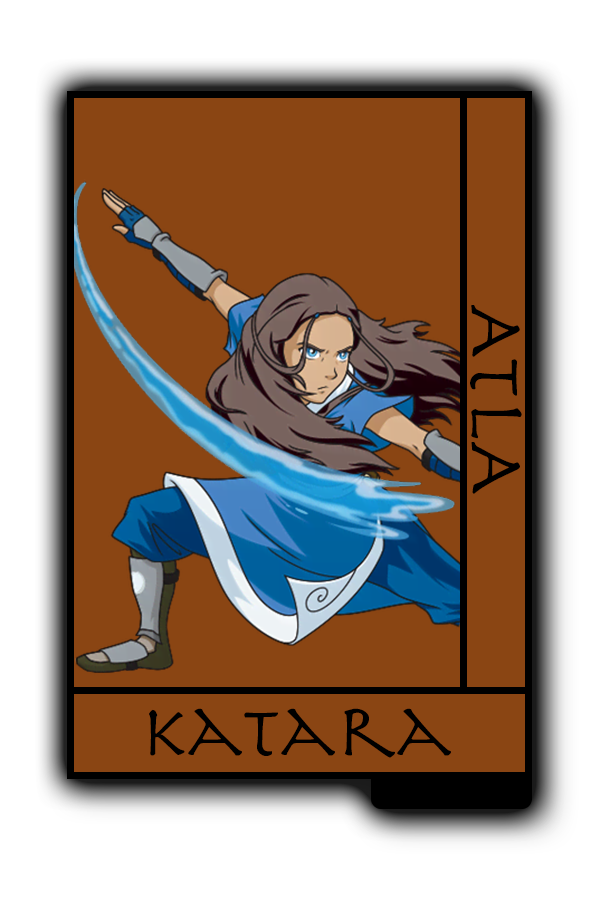
<style>
.page{position:relative;width:600px;height:900px;background:#8a4513}
.page>*{position:absolute;margin:0}
.t1{font:80.7px "Herculanum";color:#000000}
.t2{font:75px "Herculanum";color:#000000}
</style>
<div class="page">
<p class="t1" style="left:470px;top:305px;width:52px;height:189px;rotate:90deg">ATLA</p>
<p class="t2" style="left:149px;top:708px;width:302px;height:50px">katara</p>
</div>
